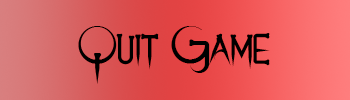
<style>
.page{position:relative;width:350px;height:100px}
.page>*{position:absolute;margin:0}
.t1{font:50px "DemonsandDarlings";color:#000000}
</style>
<div class="page">
<p class="t1" style="left:78px;top:26px;width:192px;height:58px">Quit Game</p>
</div>
